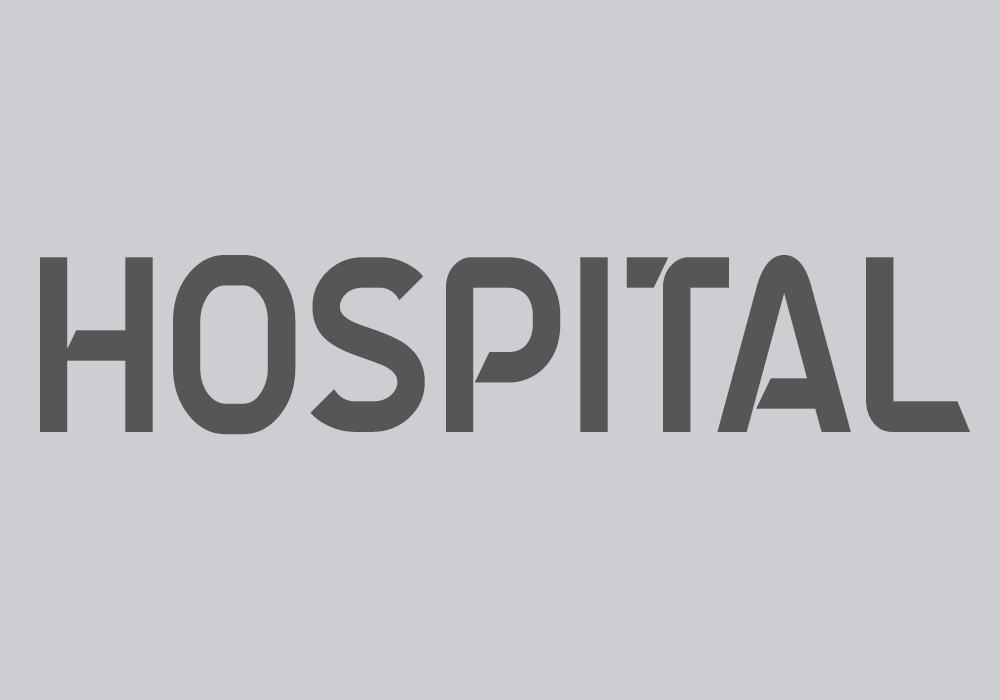
<style>
.page{position:relative;width:1000px;height:700px;background:#cdced2}
.page>*{position:absolute;margin:0}
.t1{font:235.1px "aAstroSpace";color:#575656;scale:0.77 1}
</style>
<div class="page">
<p class="t1" style="left:40px;top:255px;width:930px;height:180px">HOSPITAL</p>
</div>
